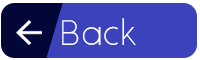
<style>
.page{position:relative;width:200px;height:60px;background:#3c42bc}
.page>*{position:absolute;margin:0}
.t1{font:36.1px "Alcubierre";letter-spacing:0.06em;color:#ffffff}
</style>
<div class="page">
<p class="t1" style="left:62px;top:18px;width:74px;height:28px">Back</p>
</div>
